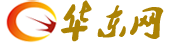
<style>
.page{position:relative;width:177px;height:45px;background:#ffffff}
.page>*{position:absolute;margin:0}
.t1{font:34.5px "Ò¶¸ùÓÑÃ«±ÊÐÐÊé¼òÌå";color:#ab8204;font-weight:bold;font-style:italic}
</style>
<div class="page">
<p class="t1" style="left:61px;top:0px;width:103px;height:42px">华东网</p>
</div>
